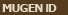
<style>
.page{position:relative;width:68px;height:15px;background:#553b1e}
.page>*{position:absolute;margin:0}
.t1{font:11px "Verdana-Bold";letter-spacing:-0.08em;color:#dedbcb}
.t2{font:11px "Arial-BoldMT";letter-spacing:-0.08em;color:#dedbcb}
</style>
<div class="page">
<p class="t1" style="left:2px;top:4px;width:55px;height:8px">MUGEN <span class="t2">I</span>D</p>
</div>
